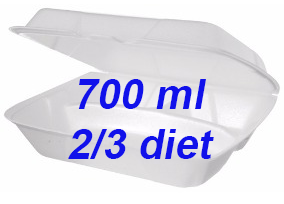
<style>
.page{position:relative;width:284px;height:204px;background:#fefefe}
.page>*{position:absolute;margin:0}
.t1{font:72px "Arial-BoldMT";color:#1111ea;font-style:italic}
</style>
<div class="page">
<p class="t1" style="left:78px;top:79px;width:128px;height:30px">700 ml</p>
<p class="t1" style="left:68px;top:129px;width:146px;height:30px">2/3 diet</p>
</div>
